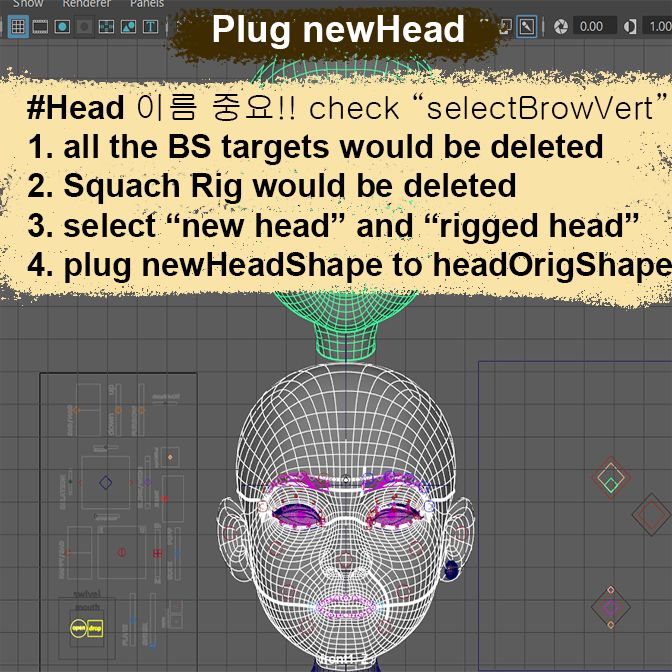
<style>
.page{position:relative;width:672px;height:672px;background:#5c5c5c}
.page>*{position:absolute;margin:0}
.t1{font:37.3px "Arial-BoldMT";color:#ffffff}
.t2{font:32.7px "Arial-BoldMT";color:#000000}
.t3{font:32.7px "Gulim";color:#000000}
</style>
<div class="page">
<p class="t1" style="left:213px;top:15px;width:251px;height:34px">Plug newHead</p>
<p class="t2" style="left:27px;top:92px;width:646px;height:191px">#Head <span class="t3">이름 중요!! check “selectBrowVert”<br></span>1. all the BS targets would be deleted<br>2. Squach Rig would be deleted<br>3. select “new head” and “rigged head” <br>4. plug newHeadShape to headOrigShape</p>
</div>
